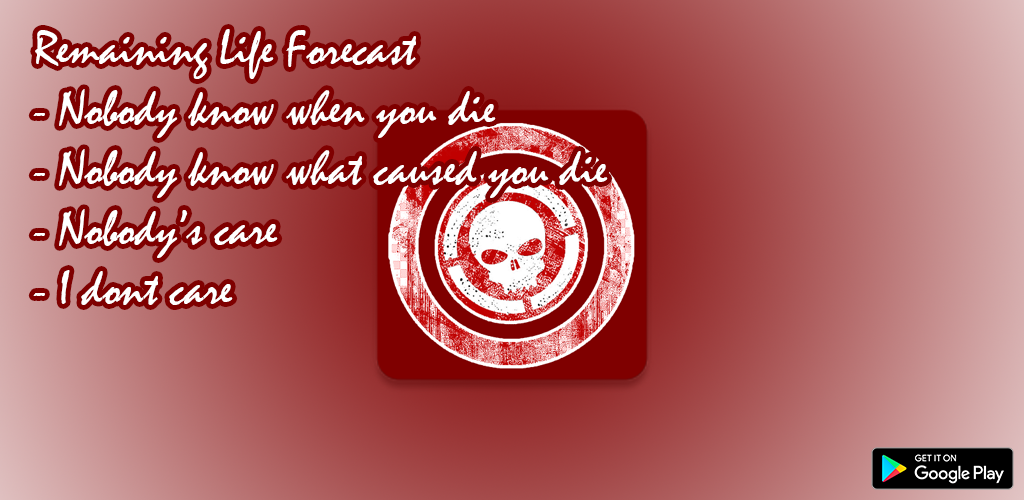
<style>
.page{position:relative;width:1024px;height:500px}
.page>*{position:absolute;margin:0}
.t1{font:50px "Mistral";color:#ffffff}
</style>
<div class="page">
<p class="t1" style="left:33px;top:29px;width:575px;height:276px">Remaining Life Forecast<br>- Nobody know when you die<br>- Nobody know what caused you die<br>- Nobody’s care<br>- I dont care</p>
</div>
